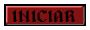
<style>
.page{position:relative;width:90px;height:30px;background:#ffffff}
.page>*{position:absolute;margin:0}
.t1{font:17.2px "Alagard";letter-spacing:0.029em;color:#000000;scale:1.04 1}
</style>
<div class="page">
<p class="t1" style="left:12px;top:10px;width:63px;height:12px">INICIAR</p>
</div>
